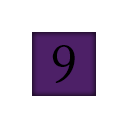
<style>
.page{position:relative;width:128px;height:128px;background:#ffffff}
.page>*{position:absolute;margin:0}
.t1{font:53.9px "ACaslonPro-Regular";color:#000000}
</style>
<div class="page">
<p class="t1" style="left:52px;top:45px;width:23px;height:38px">9</p>
</div>
